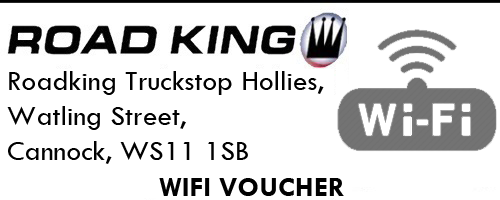
<style>
.page{position:relative;width:500px;height:200px;background:#ffffff}
.page>*{position:absolute;margin:0}
.t1{font:29.3px "TwCenMT-Regular";color:#010101}
.t2{font:29.3px "TwCenMT-Bold";color:#010101}
</style>
<div class="page">
<p class="t1" style="left:7px;top:71px;width:337px;height:125px">Roadking Truckstop Hollies,<br>Watling Street,<br>Cannock, WS11 1SB<br>    <span class="t2"> WIFI VOUCHER</span></p>
</div>
